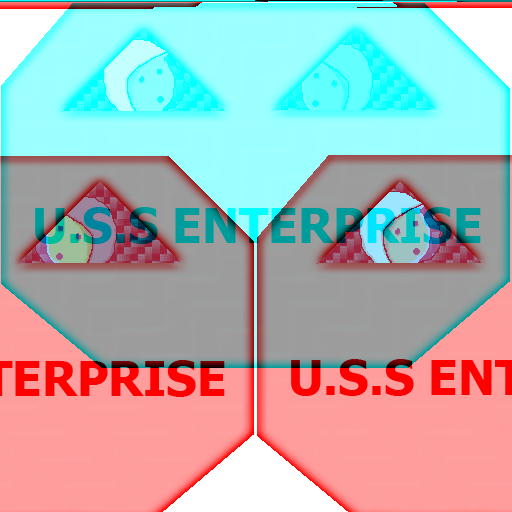
<style>
.page{position:relative;width:512px;height:512px}
.page>*{position:absolute;margin:0}
.t1{font:48px "Tahoma-Bold"}
</style>
<div class="page">
<p class="t1" style="left:35px;top:205px;width:446px;height:37px">U.S.S ENTERPRISE</p>
</div>
